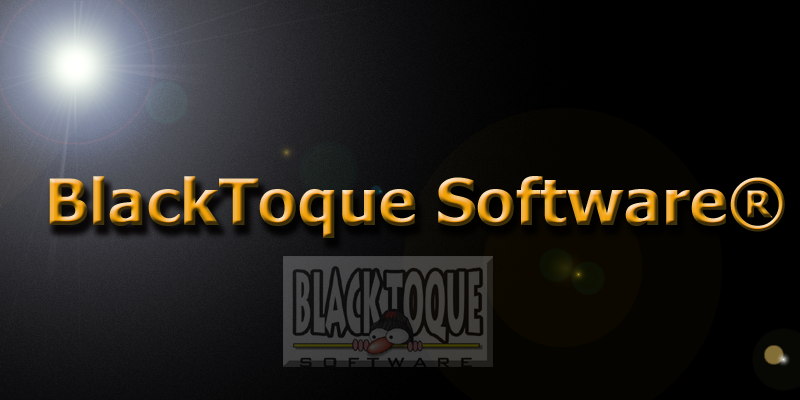
<style>
.page{position:relative;width:800px;height:400px}
.page>*{position:absolute;margin:0}
.t1{font:64px "Tahoma-Bold"}
</style>
<div class="page">
<p class="t1" style="left:49px;top:176px;width:736px;height:62px">BlackToque Software®</p>
</div>
